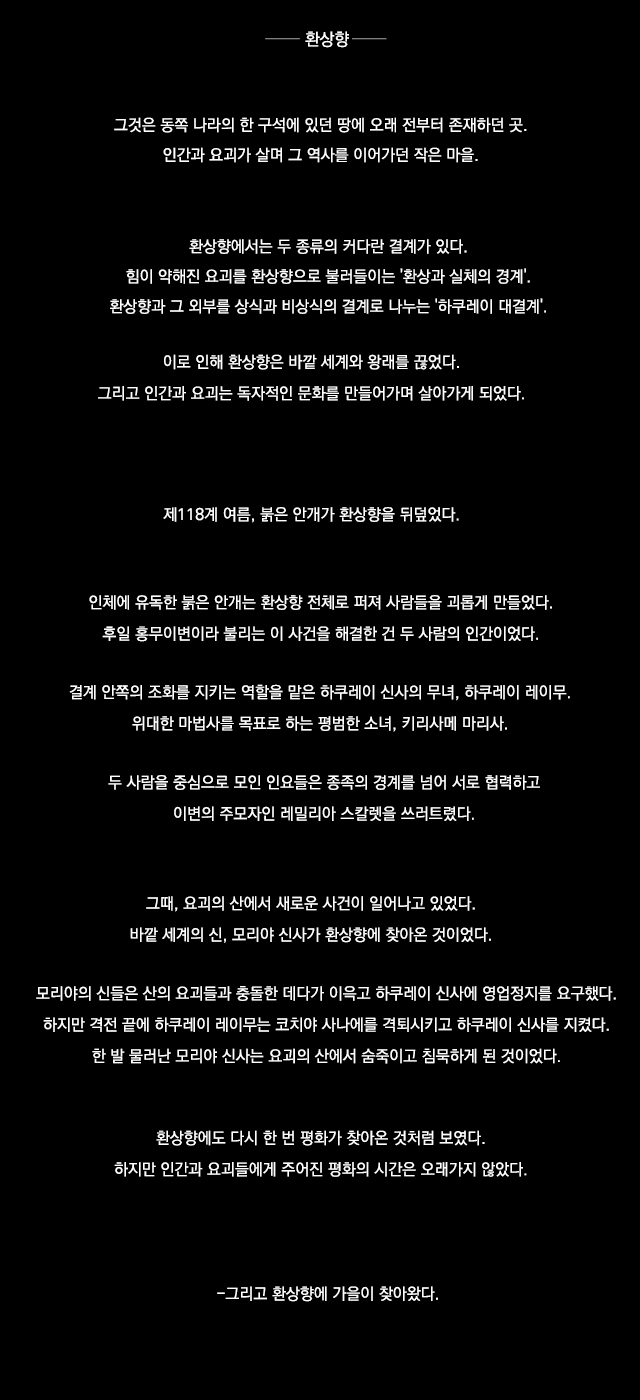
<style>
.page{position:relative;width:640px;height:1400px;background:#000000}
.page>*{position:absolute;margin:0}
.t1{font:17px "KoPubDotumMedium";color:#ffffff}
.t2{font:16px/30px "KoPubDotumMedium";color:#ffffff}
.t3{font:12px/30px "KoPubDotumMedium";color:#ffffff}
.t4{font:12px/31.3px "KoPubDotumMedium";color:#ffffff}
.t5{font:12px "KoPubDotumMedium";color:#ffffff}
</style>
<div class="page">
<p class="t1" style="left:305px;top:31px;width:44px;height:17px">환상향</p>
<p class="t2" style="left:114px;top:117px;width:413px;height:46px;text-align:center">그것은 동쪽 나라의 한 구석에 있던 땅에 오래 전부터 존재하던 곳.<br>인간과 요괴가 살며 그 역사를 이어가던 작은 마을.</p>
<p class="t3" style="left:110px;top:239px;width:436px;height:75px;text-align:center">환상향에서는 두 종류의 커다란 결계가 있다.<br>힘이 약해진 요괴를 환상향으로 불러들이는 '환상과 실체의 경계'.<br>환상향과 그 외부를 상식과 비상식의 결계로 나누는 '하쿠레이 대결계'.</p>
<p class="t4" style="left:98px;top:354px;width:426px;height:47px;text-align:center">이로 인해 환상향은 바깥 세계와 왕래를 끊었다.<br>그리고 인간과 요괴는 독자적인 문화를 만들어가며 살아가게 되었다.</p>
<p class="t5" style="left:163px;top:507px;width:296px;height:16px">제118계 여름, 붉은 안개가 환상향을 뒤덮었다.</p>
<p class="t4" style="left:89px;top:595px;width:463px;height:47px;text-align:center">인체에 유독한 붉은 안개는 환상향 전체로 퍼져 사람들을 괴롭게 만들었다.<br>후일 홍무이변이라 불리는 이 사건을 해결한 건 두 사람의 인간이었다.</p>
<p class="t4" style="left:69px;top:684px;width:501px;height:48px;text-align:center">결계 안쪽의 조화를 지키는 역할을 맡은 하쿠레이 신사의 무녀, 하쿠레이 레이무.<br>위대한 마법사를 목표로 하는 평범한 소녀, 키리사메 마리사.</p>
<p class="t4" style="left:108px;top:775px;width:432px;height:46px;text-align:center">두 사람을 중심으로 모인 인요들은 종족의 경계를 넘어 서로 협력하고<br>이변의 주모자인 레밀리아 스칼렛을 쓰러트렸다.</p>
<p class="t4" style="left:130px;top:896px;width:361px;height:47px;text-align:center">그때, 요괴의 산에서 새로운 사건이 일어나고 있었다.<br>바깥 세계의 신, 모리야 신사가 환상향에 찾아온 것이었다.</p>
<p class="t4" style="left:36px;top:986px;width:580px;height:78px;text-align:center">모리야의 신들은 산의 요괴들과 충돌한 데다가 이윽고 하쿠레이 신사에 영업정지를 요구했다.<br>하지만 격전 끝에 하쿠레이 레이무는 코치야 사나에를 격퇴시키고 하쿠레이 신사를 지켰다.<br>한 발 물러난 모리야 신사는 요괴의 산에서 숨죽이고 침묵하게 된 것이었다.</p>
<p class="t4" style="left:114px;top:1130px;width:413px;height:47px;text-align:center">환상향에도 다시 한 번 평화가 찾아온 것처럼 보였다.<br>하지만 인간과 요괴들에게 주어진 평화의 시간은 오래가지 않았다.</p>
<p class="t5" style="left:217px;top:1286px;width:221px;height:16px">-그리고 환상향에 가을이 찾아왔다.</p>
</div>
